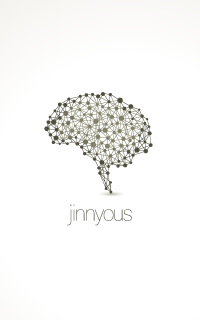
<style>
.page{position:relative;width:200px;height:320px;background:#ffffff}
.page>*{position:absolute;margin:0}
.t1{font:21.3px "Roboto-Thin";letter-spacing:-0.08em;color:#504f3e}
</style>
<div class="page">
<p class="t1" style="left:67px;top:204px;width:65px;height:22px">jinnyous</p>
</div>
